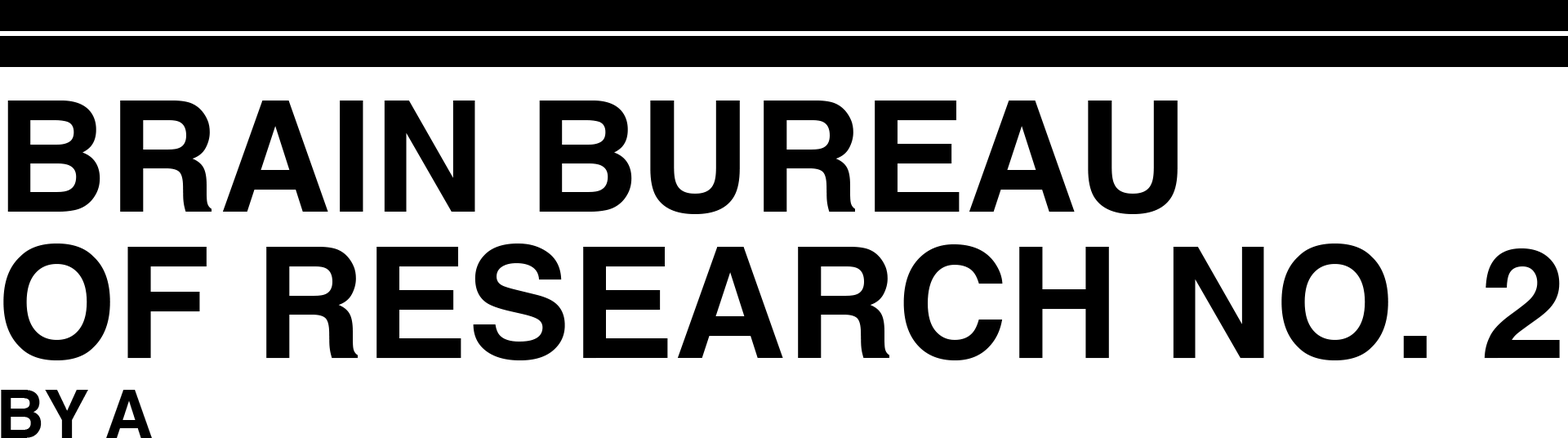
<style>
.page{position:relative;width:1568px;height:438px;background:#ffffff}
.page>*{position:absolute;margin:0}
.t1{font:154.4px/145.9px "Helvetica-Bold";color:#000000}
.t2{font:67.3px "Helvetica-Bold";color:#000000}
</style>
<div class="page">
<p class="t1" style="left:1px;top:100px;width:1559px;height:338px">BRAIN BUREAU<br>OF RESEARCH NO. 2<br><span class="t2">BY A</span></p>
</div>
